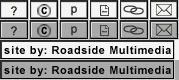
<style>
.page{position:relative;width:179px;height:80px;background:#a9a9a9}
.page>*{position:absolute;margin:0}
.t1{font:11px "Arial-BoldMT";letter-spacing:0.05em;color:#000000}
.t2{font:11px "Arial-BoldMT";letter-spacing:0.1em;color:#000000}
</style>
<div class="page">
<p class="t1" style="left:4px;top:46px;width:167px;height:11px"><span class="t2">si</span>te by: Roadside Multimedia</p>
<p class="t1" style="left:4px;top:66px;width:167px;height:11px"><span class="t2">si</span>te by: Roadside Multimedia</p>
</div>
